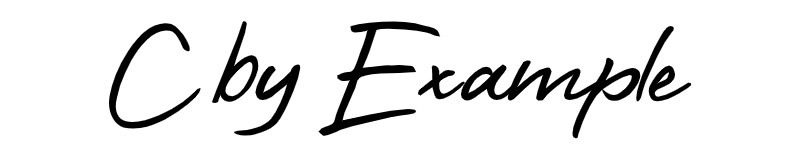
<style>
.page{position:relative;width:800px;height:160px;background:#ffffff}
.page>*{position:absolute;margin:0}
.t1{font:160px "TheFighter";color:#000000}
</style>
<div class="page">
<p class="t1" style="left:109px;top:21px;width:583px;height:118px">C by Example</p>
</div>
